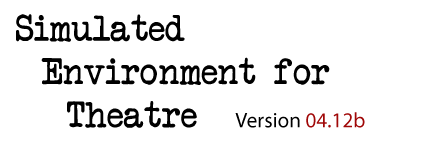
<style>
.page{position:relative;width:430px;height:160px;background:#ffffff}
.page>*{position:absolute;margin:0}
.t1{font:36px "AnotherTypewriter";color:#000000}
.t2{font:21.1px "MyriadPro-Regular";color:#000000}
.t3{font:21.1px "MyriadPro-Regular";color:#a00808}
</style>
<div class="page">
<p class="t1" style="left:16px;top:14px;width:314px;height:114px">Simulated <br> Environment for <br>  Theatre</p>
<p class="t2" style="left:235px;top:112px;width:130px;height:16px">Version <span class="t3">04.12b</span></p>
</div>
